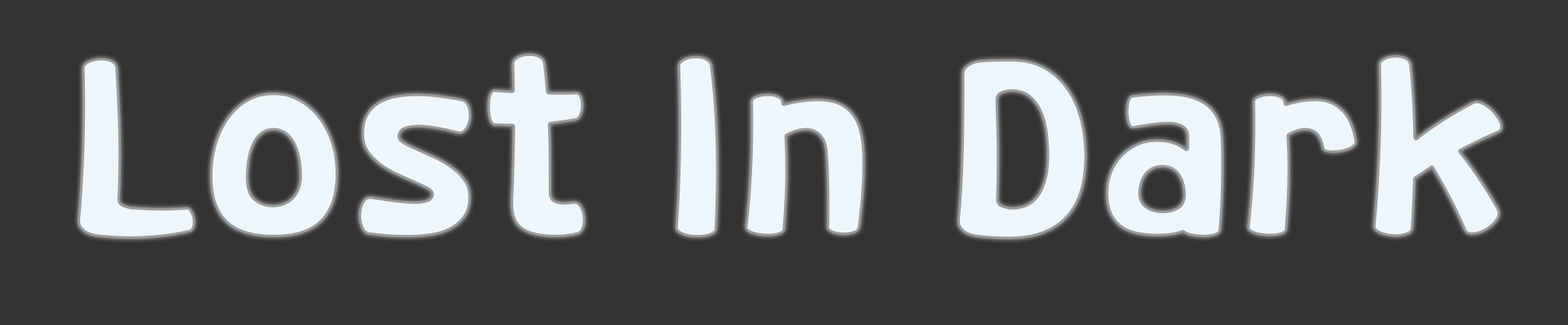
<style>
.page{position:relative;width:1568px;height:325px;background:#333333}
.page>*{position:absolute;margin:0}
.t1{font:245.1px "Katuri";color:#eff6fb}
</style>
<div class="page">
<p class="t1" style="left:77px;top:53px;width:1426px;height:187px">Lost In Dark</p>
</div>
